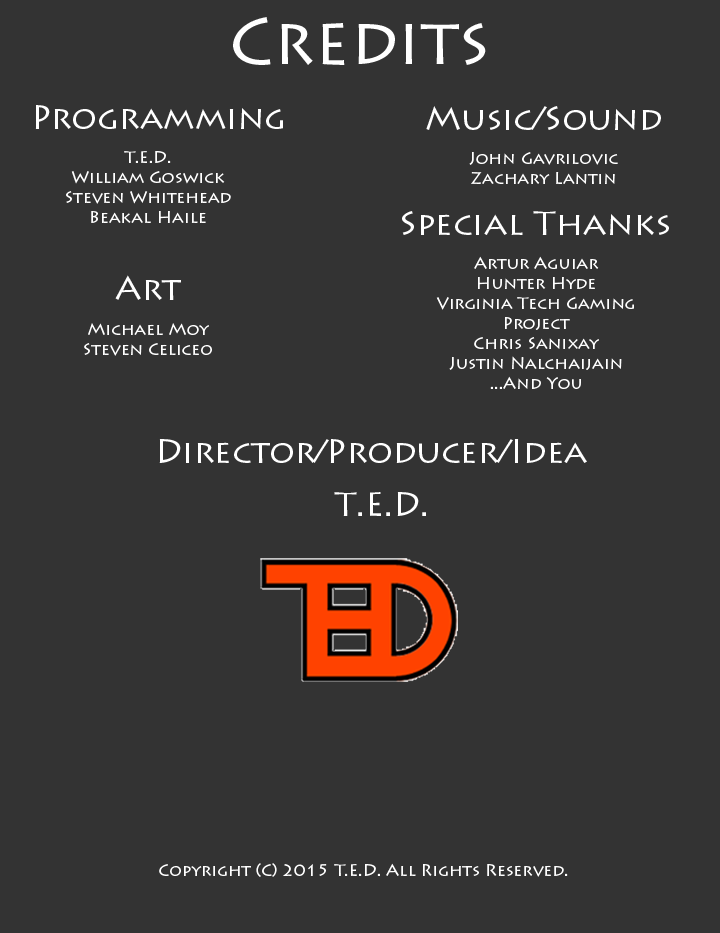
<style>
.page{position:relative;width:720px;height:933px;background:#333333}
.page>*{position:absolute;margin:0}
.t1{font:66.6px "LithosPro-Regular";color:#ffffff}
.t2{font:33.3px "LithosPro-Regular";color:#ffffff}
.t3{font:16.7px "LithosPro-Regular";color:#ffffff}
</style>
<div class="page">
<p class="t1" style="left:233px;top:17px;width:253px;height:48px">Credits</p>
<p class="t2" style="left:35px;top:105px;width:248px;height:24px">Programming</p>
<p class="t2" style="left:426px;top:106px;width:235px;height:24px">Music/Sound</p>
<p class="t3" style="left:66px;top:151px;width:165px;height:72px;text-align:center">T.E.D.<br>William Goswick<br>Steven Whitehead<br>Beakal Haile</p>
<p class="t3" style="left:469px;top:152px;width:149px;height:32px;text-align:center">John Gavrilovic<br>Zachary Lantin</p>
<p class="t2" style="left:402px;top:211px;width:267px;height:24px">Special Thanks</p>
<p class="t3" style="left:436px;top:256px;width:198px;height:133px;text-align:center">Artur Aguiar<br>Hunter Hyde<br>Virginia Tech Gaming<br>Project<br>Chris Sanixay<br>Justin Nalchaijain<br>...And You</p>
<p class="t2" style="left:115px;top:275px;width:66px;height:25px">Art</p>
<p class="t3" style="left:84px;top:323px;width:128px;height:33px;text-align:center">Michael Moy<br>Steven Celiceo</p>
<p class="t2" style="left:159px;top:439px;width:428px;height:24px">Director/Producer/Idea</p>
<p class="t2" style="left:334px;top:492px;width:92px;height:24px">T.E.D.</p>
<p class="t3" style="left:159px;top:863px;width:409px;height:14px">Copyright (C) 2015 T.E.D. All Rights Reserved.</p>
</div>
